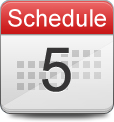
<style>
.page{position:relative;width:114px;height:122px}
.page>*{position:absolute;margin:0}
.t1{font:24px "ArialMT";color:#ffffff}
</style>
<div class="page">
<p class="t1" style="left:8px;top:9px;width:98px;height:18px">Schedule</p>
</div>
